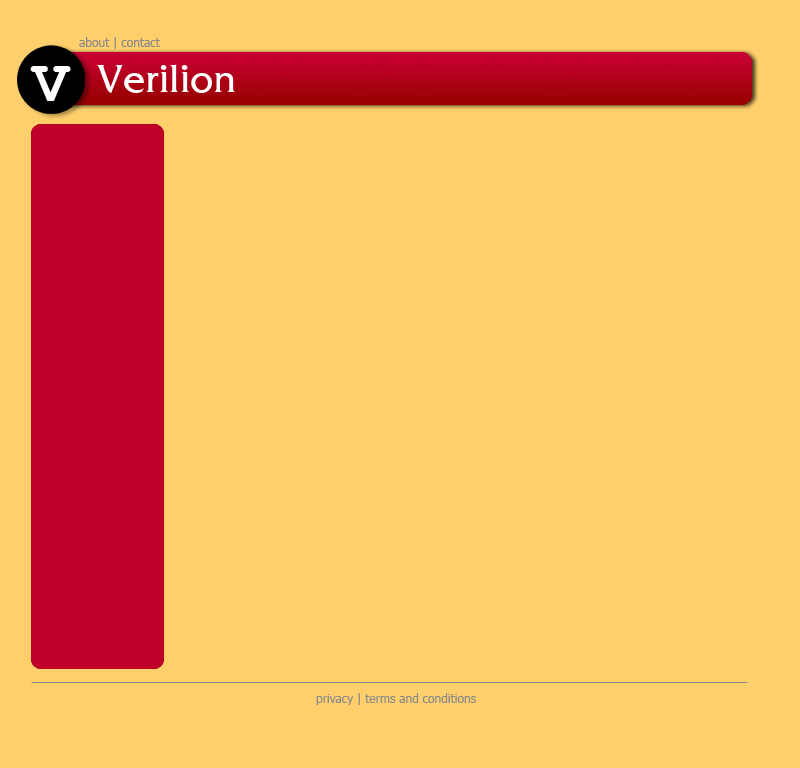
<style>
.page{position:relative;width:800px;height:768px;background:#ffcf6b}
.page>*{position:absolute;margin:0}
.t1{font:12px "Tahoma";color:#898989}
.t2{font:36px "Fritz-Quad";color:#ffffff}
.t3{font:61.8px "CourierNewPS-BoldMT";color:#ffffff}
</style>
<div class="page">
<p class="t1" style="left:79px;top:37px;width:81px;height:12px">about | contact</p>
<p class="t2" style="left:97px;top:64px;width:138px;height:29px">Verilion</p>
<p class="t3" style="left:30px;top:66px;width:41px;height:35px">V</p>
<p class="t1" style="left:316px;top:693px;width:160px;height:12px">privacy | terms and conditions</p>
</div>
